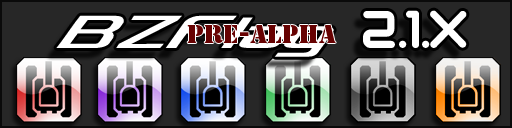
<style>
.page{position:relative;width:512px;height:128px;background:#272727}
.page>*{position:absolute;margin:0}
.t1{font:60px "Concielian";color:#ffffff}
.t2{font:36px "fRiNgE-Regular";color:#ffffff}
.t3{font:24px "StencilStd";color:#670202}
</style>
<div class="page">
<p class="t1" style="left:56px;top:10px;width:411px;height:47px">BZFlag <span class="t2">2.1.X</span></p>
<p class="t3" style="left:187px;top:25px;width:149px;height:18px">Pre-Alpha</p>
</div>
